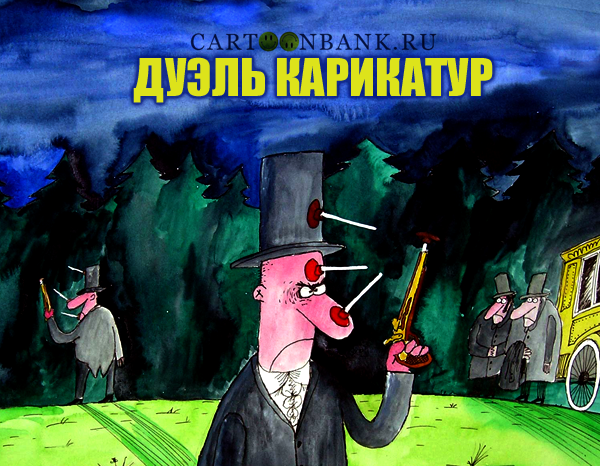
<style>
.page{position:relative;width:600px;height:466px}
.page>*{position:absolute;margin:0}
.t1{font:48px "Impact";color:#dde31b}
</style>
<div class="page">
<p class="t1" style="left:133px;top:57px;width:360px;height:46px">ДУЭЛЬ КАРИКАТУР</p>
</div>
